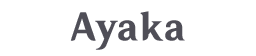
<style>
.page{position:relative;width:256px;height:56px;background:#ffffff}
.page>*{position:absolute;margin:0}
.t1{font:36px "HYWenHei-HEW";color:#4f4e57}
</style>
<div class="page">
<p class="t1" style="left:70px;top:11px;width:115px;height:39px">Ayaka</p>
</div>
